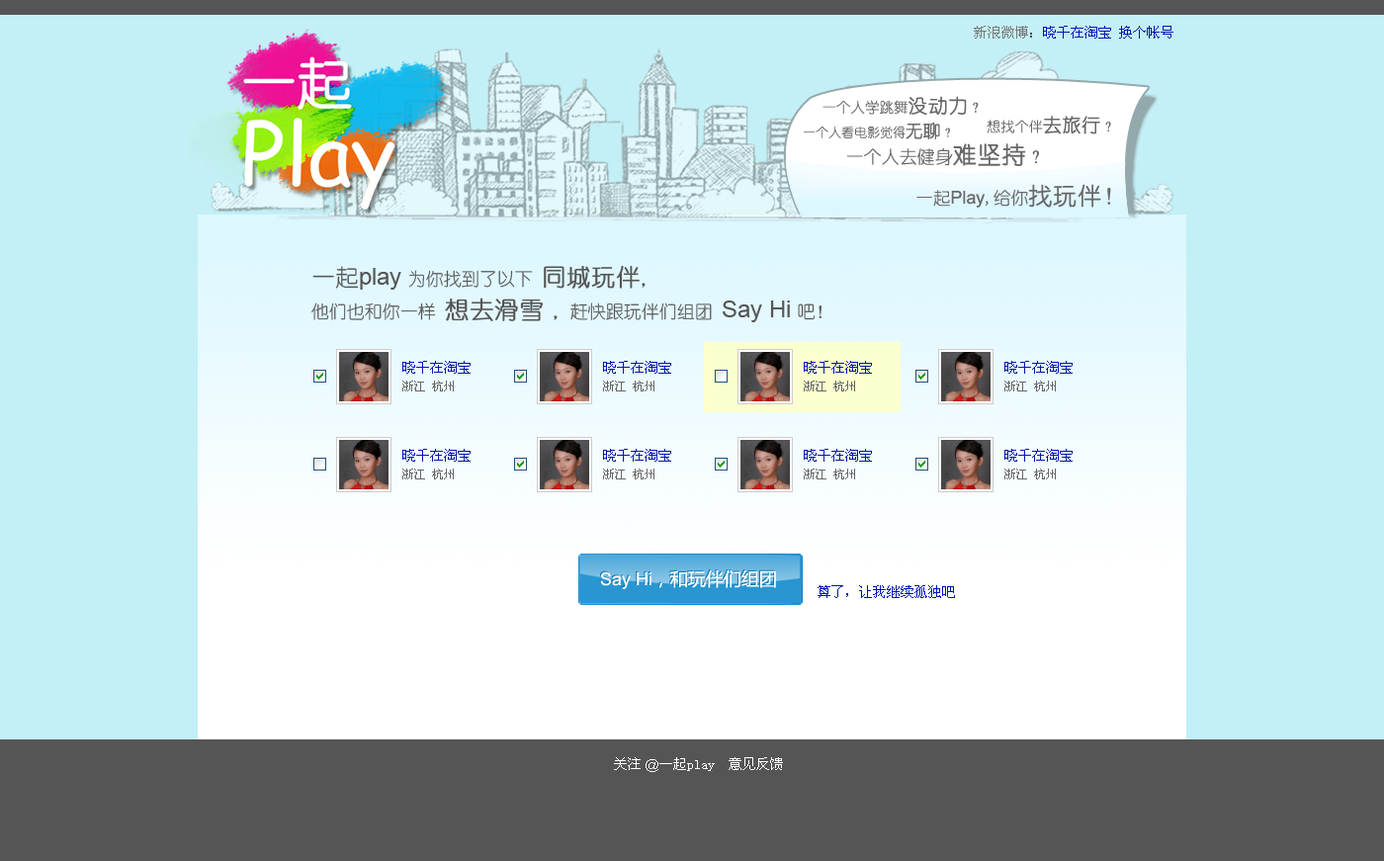
<style>
.page{position:relative;width:1384px;height:861px;background:#c3f0f6}
.page>*{position:absolute;margin:0}
.t1{font:13.8px "SimSun";color:#0015b1}
.t2{font:13.8px "SimSun";color:#797979}
.t3{font:13.8px "SimSun";color:#484848}
.t4{font:14.4px "YouYuan";color:#696868}
.t5{font:19.2px "YouYuan";color:#696868;font-weight:bold}
.t6{font:12.8px "YouYuan";color:#696868}
.t7{font:17.1px "YouYuan";color:#696868;font-weight:bold}
.t8{font:14px "YouYuan";color:#696868}
.t9{font:18.7px "YouYuan";color:#696868;font-weight:bold}
.t10{font:17.8px "YouYuan";color:#696868}
.t11{font:23.7px "YouYuan";color:#696868;font-weight:bold}
.t12{font:17.8px "ArialMT";color:#696868}
.t13{font:23.7px "YouYuan";color:#696868}
.t14{font:17.8px/14.8px "YouYuan";color:#555555}
.t15{font:23.7px/14.8px "YouYuan";color:#555555}
.t16{font:23.7px/14.8px "ArialMT";color:#555555}
.t17{font:23.7px/14.8px "YouYuan";color:#555555;font-weight:bold}
.t18{font:23.7px/17.8px "YouYuan";color:#555555;font-weight:bold}
.t19{font:13.8px/17.8px "SimSun";color:#0015b1}
.t20{font:11.9px/17.8px "SimSun";color:#666666}
.t21{font:17.8px "MicrosoftYaHei";color:#ffffff}
.t22{font:17.8px "ArialMT";color:#ffffff}
.t23{font:13.8px "SimSun";color:#ffffff}
.t24{font:13.8px "ArialMT";color:#ffffff}
</style>
<div class="page">
<p class="t1" style="left:974px;top:26px;width:200px;height:13px"><span class="t2">新浪微博</span><span class="t3">：</span>晓千在淘宝 换个帐号</p>
<p class="t4" style="left:823px;top:96px;width:156px;height:20px">一个人学跳舞<span class="t5">没动力</span>？</p>
<p class="t6" style="left:804px;top:123px;width:146px;height:16px">一个人看电影觉得<span class="t7">无聊</span>？</p>
<p class="t8" style="left:987px;top:116px;width:125px;height:18px">想找个伴<span class="t9">去旅行</span>？</p>
<p class="t10" style="left:847px;top:143px;width:192px;height:23px">一个人去健身<span class="t11">难坚持</span>？</p>
<p class="t12" style="left:917px;top:184px;width:195px;height:24px"><span class="t10">一起</span>Play<span class="t10">,给你</span><span class="t11">找玩伴</span><span class="t13">！</span></p>
<p class="t14" style="left:311px;top:265px;width:512px;height:57px"><span class="t15">一起</span><span class="t16">play </span>为你找到了以下 <span class="t17">同城玩伴</span>，<br> <br>他们也和你一样 <span class="t18">想去滑雪</span> ，赶快跟玩伴们组团 <span class="t16">Say Hi </span>吧！</p>
<p class="t19" style="left:402px;top:361px;width:69px;height:31px">晓千在淘宝<br><span class="t20">浙江 杭州</span></p>
<p class="t19" style="left:603px;top:361px;width:68px;height:31px">晓千在淘宝<br><span class="t20">浙江 杭州</span></p>
<p class="t19" style="left:804px;top:361px;width:68px;height:31px">晓千在淘宝<br><span class="t20">浙江 杭州</span></p>
<p class="t19" style="left:1005px;top:361px;width:68px;height:31px">晓千在淘宝<br><span class="t20">浙江 杭州</span></p>
<p class="t19" style="left:402px;top:449px;width:69px;height:31px">晓千在淘宝<br><span class="t20">浙江 杭州</span></p>
<p class="t19" style="left:603px;top:449px;width:68px;height:31px">晓千在淘宝<br><span class="t20">浙江 杭州</span></p>
<p class="t19" style="left:804px;top:449px;width:68px;height:31px">晓千在淘宝<br><span class="t20">浙江 杭州</span></p>
<p class="t19" style="left:1005px;top:449px;width:68px;height:31px">晓千在淘宝<br><span class="t20">浙江 杭州</span></p>
<p class="t21" style="left:600px;top:570px;width:176px;height:19px"><span class="t22">Say Hi</span>，和玩伴们组团</p>
<p class="t1" style="left:818px;top:585px;width:137px;height:13px">算了，让我继续孤独吧</p>
<p class="t23" style="left:614px;top:757px;width:169px;height:15px">关注<span class="t24"> @</span>一起play  意见反馈</p>
</div>
